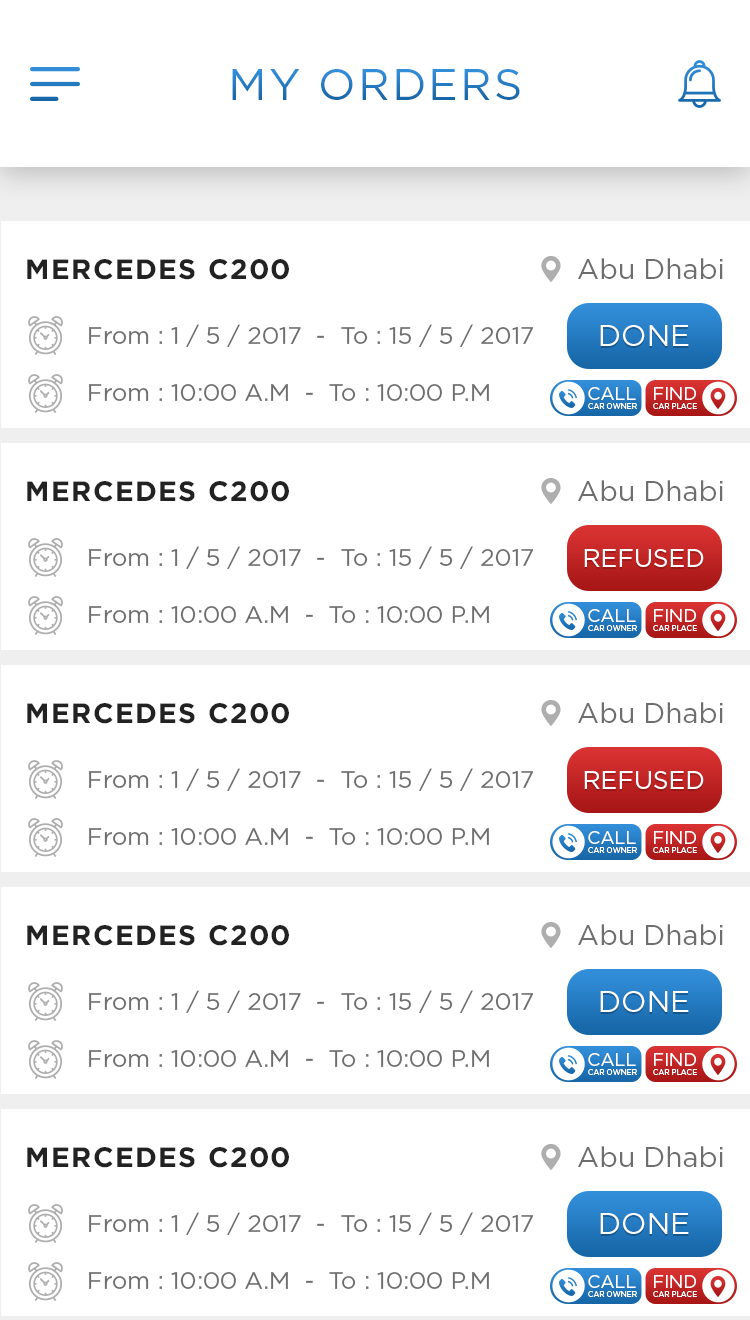
<style>
.page{position:relative;width:750px;height:1320px;background:#ffffff}
.page>*{position:absolute;margin:0}
.t1{font:44px "Gotham-Book";letter-spacing:0.05em;text-transform:uppercase}
.t2{font:28px "Gotham-Bold";letter-spacing:0.05em;color:#222222}
.t3{font:28px "Gotham-Book";color:#6e6e6e}
.t4{font:24px "Gotham-Book";color:#6e6e6e}
.t5{font:30px "Gotham-Book";color:#ffffff}
.t6{font:18.1px "Gotham-Book";color:#ffffff}
.t7{font:7.4px "Gotham-Book";color:#ffffff}
.t8{font:25px "Gotham-Book";color:#ffffff}
</style>
<div class="page">
<p class="t1" style="left:232px;top:69px;width:288px;height:31px">MY ORDERS</p>
<p class="t2" style="left:27px;top:259px;width:262px;height:21px">MERCEDES C200</p>
<p class="t3" style="left:578px;top:258px;width:145px;height:21px">Abu Dhabi</p>
<p class="t4" style="left:89px;top:324px;width:444px;height:23px">From : 1 / 5 / 2017  -  To : 15 / 5 / 2017</p>
<p class="t5" style="left:600px;top:325px;width:89px;height:21px">DONE</p>
<p class="t4" style="left:89px;top:384px;width:400px;height:17px">From : 10:00 A.M  -  To : 10:00 P.M</p>
<p class="t6" style="left:588px;top:387px;width:48px;height:13px">CALL</p>
<p class="t6" style="left:654px;top:387px;width:42px;height:13px">FIND</p>
<p class="t7" style="left:588px;top:403px;width:49px;height:6px">CAR OWNER</p>
<p class="t7" style="left:653px;top:403px;width:44px;height:6px">CAR PLACE</p>
<p class="t2" style="left:27px;top:481px;width:262px;height:21px">MERCEDES C200</p>
<p class="t3" style="left:578px;top:480px;width:145px;height:21px">Abu Dhabi</p>
<p class="t4" style="left:89px;top:546px;width:444px;height:23px">From : 1 / 5 / 2017  -  To : 15 / 5 / 2017</p>
<p class="t8" style="left:584px;top:549px;width:120px;height:18px">REFUSED</p>
<p class="t4" style="left:89px;top:606px;width:400px;height:17px">From : 10:00 A.M  -  To : 10:00 P.M</p>
<p class="t6" style="left:588px;top:609px;width:48px;height:13px">CALL</p>
<p class="t6" style="left:654px;top:609px;width:42px;height:13px">FIND</p>
<p class="t7" style="left:588px;top:625px;width:49px;height:6px">CAR OWNER</p>
<p class="t7" style="left:653px;top:625px;width:44px;height:6px">CAR PLACE</p>
<p class="t3" style="left:578px;top:702px;width:145px;height:21px">Abu Dhabi</p>
<p class="t2" style="left:27px;top:703px;width:262px;height:21px">MERCEDES C200</p>
<p class="t4" style="left:89px;top:768px;width:444px;height:23px">From : 1 / 5 / 2017  -  To : 15 / 5 / 2017</p>
<p class="t8" style="left:584px;top:771px;width:120px;height:18px">REFUSED</p>
<p class="t4" style="left:89px;top:828px;width:400px;height:17px">From : 10:00 A.M  -  To : 10:00 P.M</p>
<p class="t6" style="left:588px;top:831px;width:48px;height:13px">CALL</p>
<p class="t6" style="left:654px;top:831px;width:42px;height:13px">FIND</p>
<p class="t7" style="left:588px;top:847px;width:49px;height:6px">CAR OWNER</p>
<p class="t7" style="left:653px;top:847px;width:44px;height:6px">CAR PLACE</p>
<p class="t2" style="left:27px;top:925px;width:262px;height:21px">MERCEDES C200</p>
<p class="t3" style="left:578px;top:924px;width:145px;height:21px">Abu Dhabi</p>
<p class="t4" style="left:89px;top:990px;width:444px;height:23px">From : 1 / 5 / 2017  -  To : 15 / 5 / 2017</p>
<p class="t5" style="left:600px;top:991px;width:89px;height:21px">DONE</p>
<p class="t4" style="left:89px;top:1050px;width:400px;height:17px">From : 10:00 A.M  -  To : 10:00 P.M</p>
<p class="t6" style="left:588px;top:1053px;width:48px;height:13px">CALL</p>
<p class="t6" style="left:654px;top:1053px;width:42px;height:13px">FIND</p>
<p class="t7" style="left:588px;top:1069px;width:49px;height:6px">CAR OWNER</p>
<p class="t7" style="left:653px;top:1069px;width:44px;height:6px">CAR PLACE</p>
<p class="t2" style="left:27px;top:1147px;width:262px;height:21px">MERCEDES C200</p>
<p class="t3" style="left:578px;top:1146px;width:145px;height:21px">Abu Dhabi</p>
<p class="t4" style="left:89px;top:1212px;width:444px;height:23px">From : 1 / 5 / 2017  -  To : 15 / 5 / 2017</p>
<p class="t5" style="left:600px;top:1213px;width:89px;height:21px">DONE</p>
<p class="t4" style="left:89px;top:1272px;width:400px;height:17px">From : 10:00 A.M  -  To : 10:00 P.M</p>
<p class="t6" style="left:588px;top:1275px;width:48px;height:13px">CALL</p>
<p class="t6" style="left:654px;top:1275px;width:42px;height:13px">FIND</p>
<p class="t7" style="left:588px;top:1291px;width:49px;height:6px">CAR OWNER</p>
<p class="t7" style="left:653px;top:1291px;width:44px;height:6px">CAR PLACE</p>
</div>
